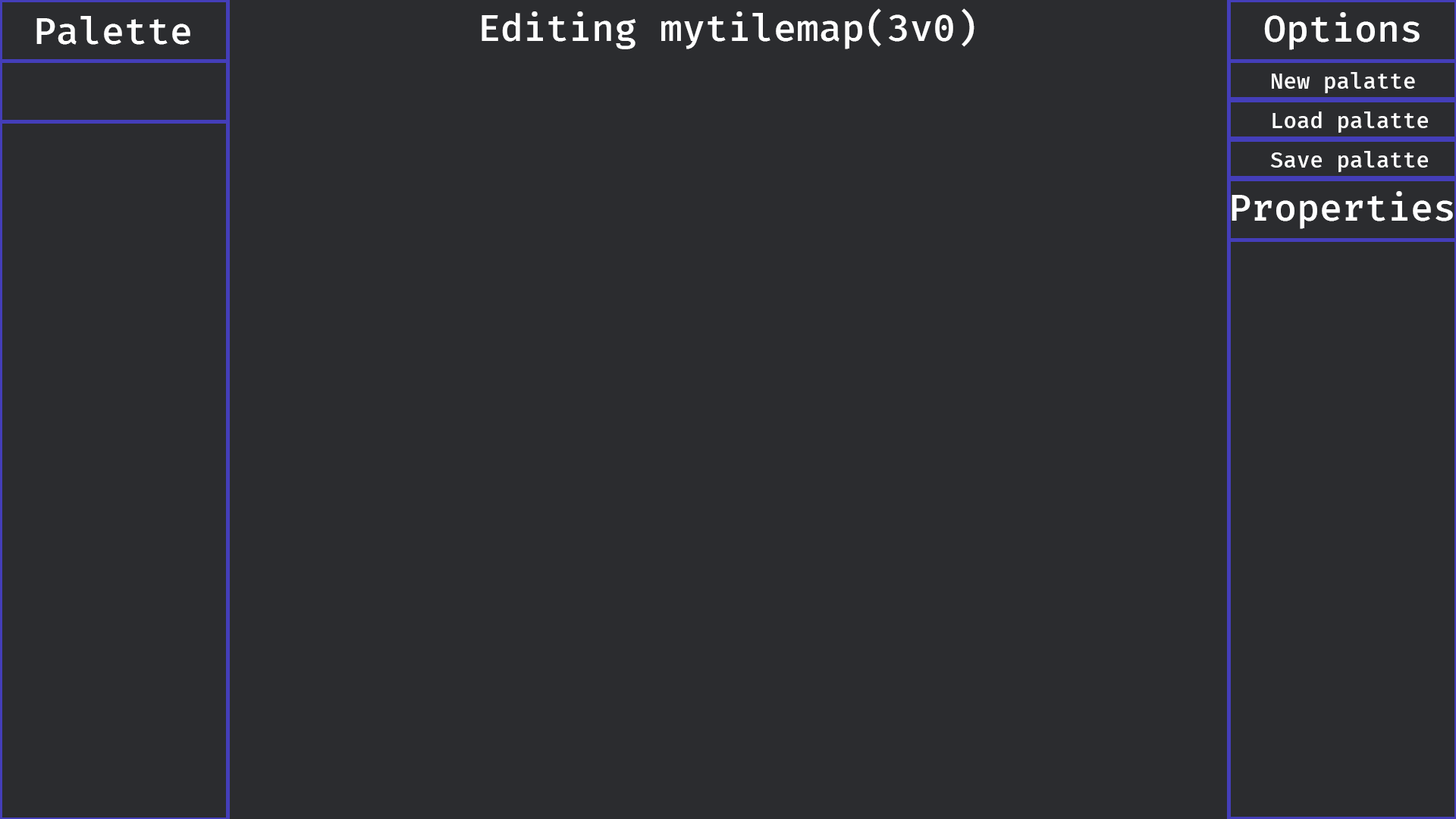
<style>
.page{position:relative;width:1456px;height:819px;background:#2b2c2f}
.page>*{position:absolute;margin:0}
.t1{font:37.9px "FiraMono-Medium";color:#ffffff}
.t2{font:22.1px "FiraMono-Medium";color:#ffffff}
</style>
<div class="page">
<p class="t1" style="left:36px;top:16px;width:154px;height:29px">Palette</p>
<p class="t1" style="left:482px;top:8px;width:492px;height:41px">Editing mytilemap(3v0)</p>
<p class="t1" style="left:1264px;top:12px;width:156px;height:38px">Options</p>
<p class="t2" style="left:1272px;top:72px;width:143px;height:21px">New palatte</p>
<p class="t2" style="left:1272px;top:111px;width:156px;height:22px">Load palatte</p>
<p class="t2" style="left:1270px;top:151px;width:158px;height:21px">Save palatte</p>
<p class="t1" style="left:1232px;top:191px;width:221px;height:38px">Properties</p>
</div>
